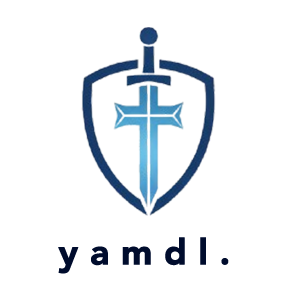
<style>
.page{position:relative;width:300px;height:300px;background:#ffffff}
.page>*{position:absolute;margin:0}
.t1{font:35.7px "Avenir-Black";letter-spacing:0.3em;color:#000c2d;font-weight:bold}
</style>
<div class="page">
<p class="t1" style="left:58px;top:237px;width:171px;height:37px">yamdl.</p>
</div>
